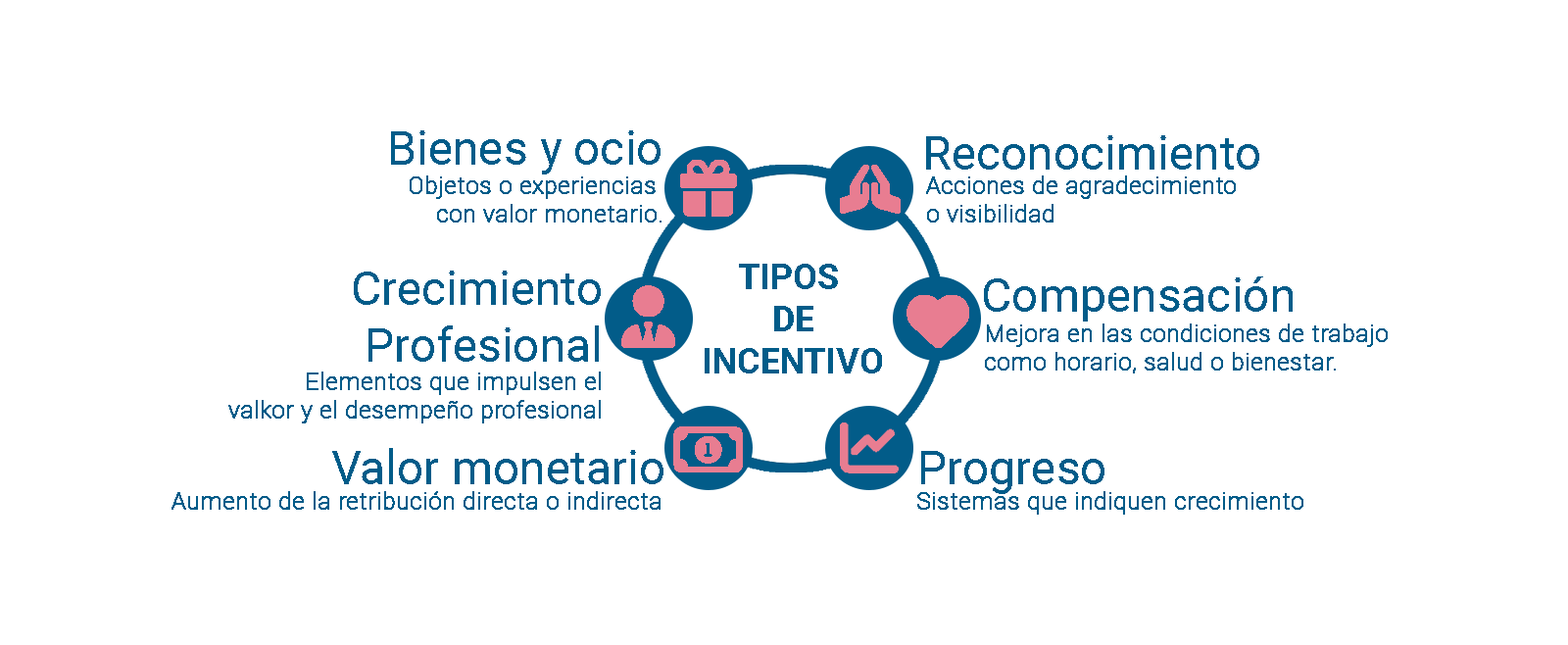
<style>
.page{position:relative;width:1568px;height:645px;background:#ffffff}
.page>*{position:absolute;margin:0}
.t1{font:47px "Roboto-Regular";color:#025c89}
.t2{font:23.5px "Roboto-Thin";color:#025c89;font-weight:bold}
.t3{font:35.3px "Roboto-Bold";color:#025c89}
</style>
<div class="page">
<p class="t1" style="left:391px;top:130px;width:270px;height:44px">Bienes y ocio</p>
<p class="t1" style="left:926px;top:135px;width:333px;height:35px">Reconocimiento</p>
<p class="t2" style="left:410px;top:175px;width:252px;height:47px;text-align:right">Objetos o experiencias <br>con valor monetario.</p>
<p class="t2" style="left:926px;top:175px;width:310px;height:47px">Acciones de agradecimiento<br>o visibilidad</p>
<p class="t3" style="left:705px;top:264px;width:177px;height:109px;text-align:center">TIPOS <br>DE<br>INCENTIVO</p>
<p class="t1" style="left:354px;top:270px;width:247px;height:92px;text-align:right">Crecimiento<br>Profesional</p>
<p class="t1" style="left:984px;top:276px;width:309px;height:45px">Compensación</p>
<p class="t2" style="left:985px;top:323px;width:403px;height:50px">Mejora en las condiciones de trabajo<br>como horario, salud o bienestar.</p>
<p class="t2" style="left:228px;top:371px;width:373px;height:52px;text-align:right">Elementos que impulsen el<br>valkor y el desempeño profesional</p>
<p class="t1" style="left:332px;top:448px;width:331px;height:36px">Valor monetario</p>
<p class="t1" style="left:921px;top:451px;width:183px;height:43px">Progreso</p>
<p class="t2" style="left:172px;top:491px;width:489px;height:19px">Aumento de la retribución directa o indirecta</p>
<p class="t2" style="left:917px;top:491px;width:386px;height:23px">Sistemas que indiquen crecimiento</p>
</div>
